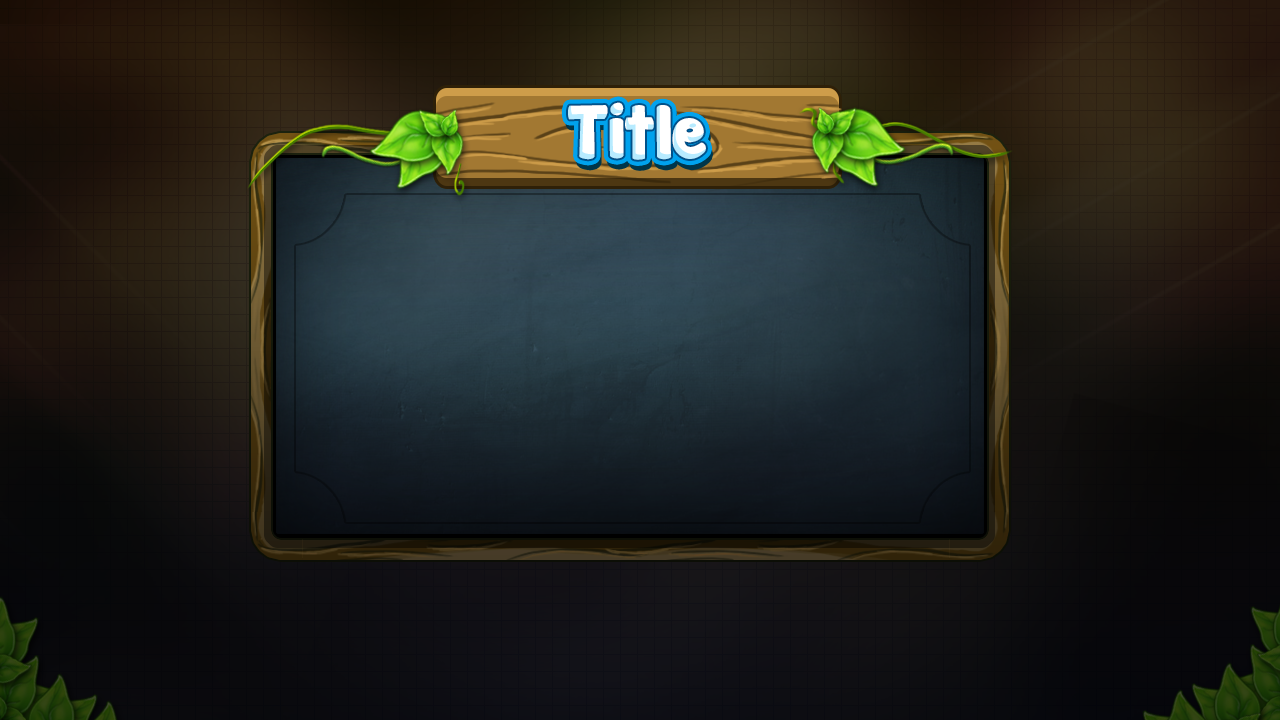
<style>
.page{position:relative;width:1280px;height:720px}
.page>*{position:absolute;margin:0}
.t1{font:67.7px "JandaManateeSolid";color:#ffffff}
</style>
<div class="page">
<p class="t1" style="left:568px;top:102px;width:138px;height:58px">Title</p>
</div>
